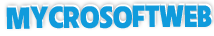
<style>
.page{position:relative;width:214px;height:36px;background:#109bdc}
.page>*{position:absolute;margin:0}
.t1{font:27.4px "UTM-American-Sans";color:#109bdc}
</style>
<div class="page">
<p class="t1" style="left:6px;top:5px;width:206px;height:24px;rotate:-1deg">MYCROSOFTWEB</p>
<p class="t1" style="left:7px;top:3px;width:206px;height:24px;rotate:-1deg">MYCROSOFTWEB</p>
</div>
